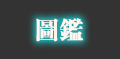
<style>
.page{position:relative;width:120px;height:59px;background:#333333}
.page>*{position:absolute;margin:0}
.t1{font:24px "RyuminPr6N-ExBold";color:#fff6f2;font-weight:bold}
</style>
<div class="page">
<p class="t1" style="left:36px;top:18px;width:48px;height:24px">圖鑑</p>
</div>
